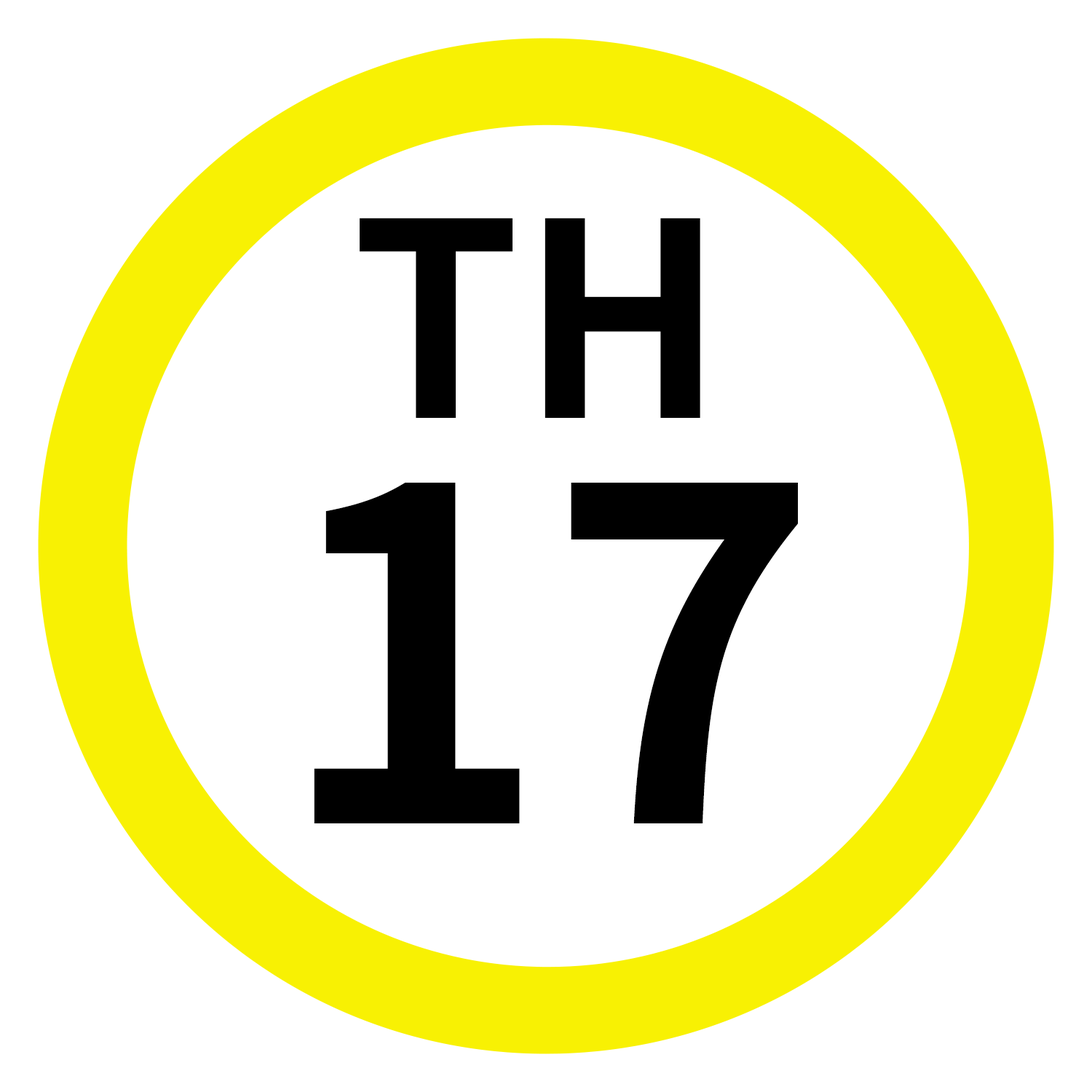
<style>
.page{position:relative;width:1092px;height:1092px;background:#ffffff}
.page>*{position:absolute;margin:0}
.t1{font:269.8px "NotoSansJP-Bold";color:#000000}
.t2{font:460.5px "NotoSansJP-Bold";color:#000000}
</style>
<div class="page">
<p class="t1" style="left:360px;top:218px;width:340px;height:200px">TH</p>
<p class="t2" style="left:314px;top:483px;width:484px;height:340px">17</p>
</div>
